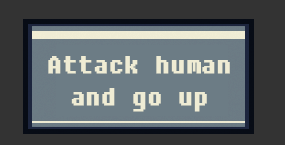
<style>
.page{position:relative;width:285px;height:145px;background:#333333}
.page>*{position:absolute;margin:0}
.t1{font:29.3px/32px "DungGeunMo";color:#efecd4;font-weight:bold}
</style>
<div class="page">
<p class="t1" style="left:48px;top:56px;width:182px;height:56px;text-align:center">Attack human<br>and go up</p>
</div>
